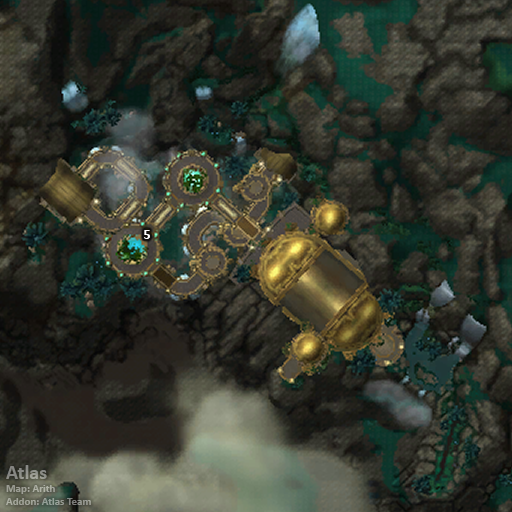
<style>
.page{position:relative;width:512px;height:512px}
.page>*{position:absolute;margin:0}
.t1{font:14px "Calibri-Bold";color:#ffffff}
.t2{font:11px "Calibri-Bold";color:#969a92}
.t3{font:20px "Calibri-Bold";color:#969a92}
</style>
<div class="page">
<p class="t1" style="left:144px;top:230px;width:6px;height:9px">5</p>
<p class="t2" style="left:6px;top:465px;width:85px;height:40px"><span class="t3">Atlas<br></span>Map: Arith<br>Addon: Atlas Team</p>
</div>
